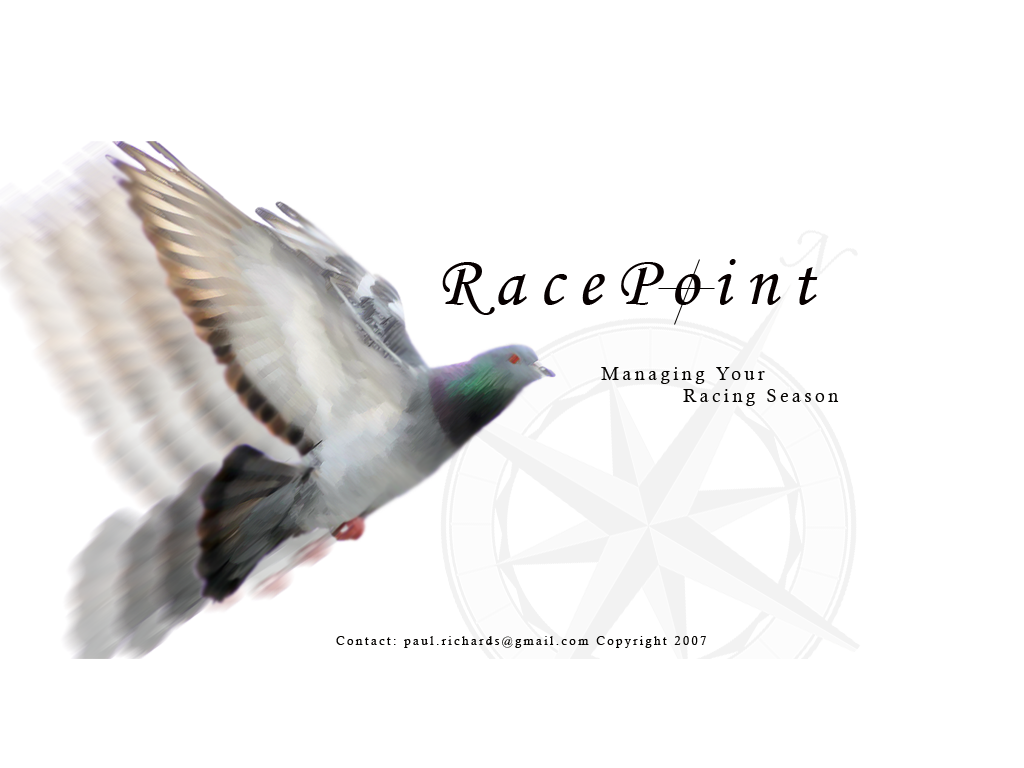
<style>
.page{position:relative;width:1024px;height:768px;background:#ffffff}
.page>*{position:absolute;margin:0}
.t1{font:18px "CalistoMT";letter-spacing:0.2em;color:#040200}
.t2{font:12px "CalistoMT";letter-spacing:0.2em;color:#040200}
</style>
<div class="page">
<p class="t1" style="left:601px;top:367px;width:238px;height:39px;text-align:center">Managing Your <br>                  Racing Season</p>
<p class="t2" style="left:336px;top:636px;width:370px;height:12px">Contact: paul.richards@gmail.com Copyright 2007</p>
</div>
